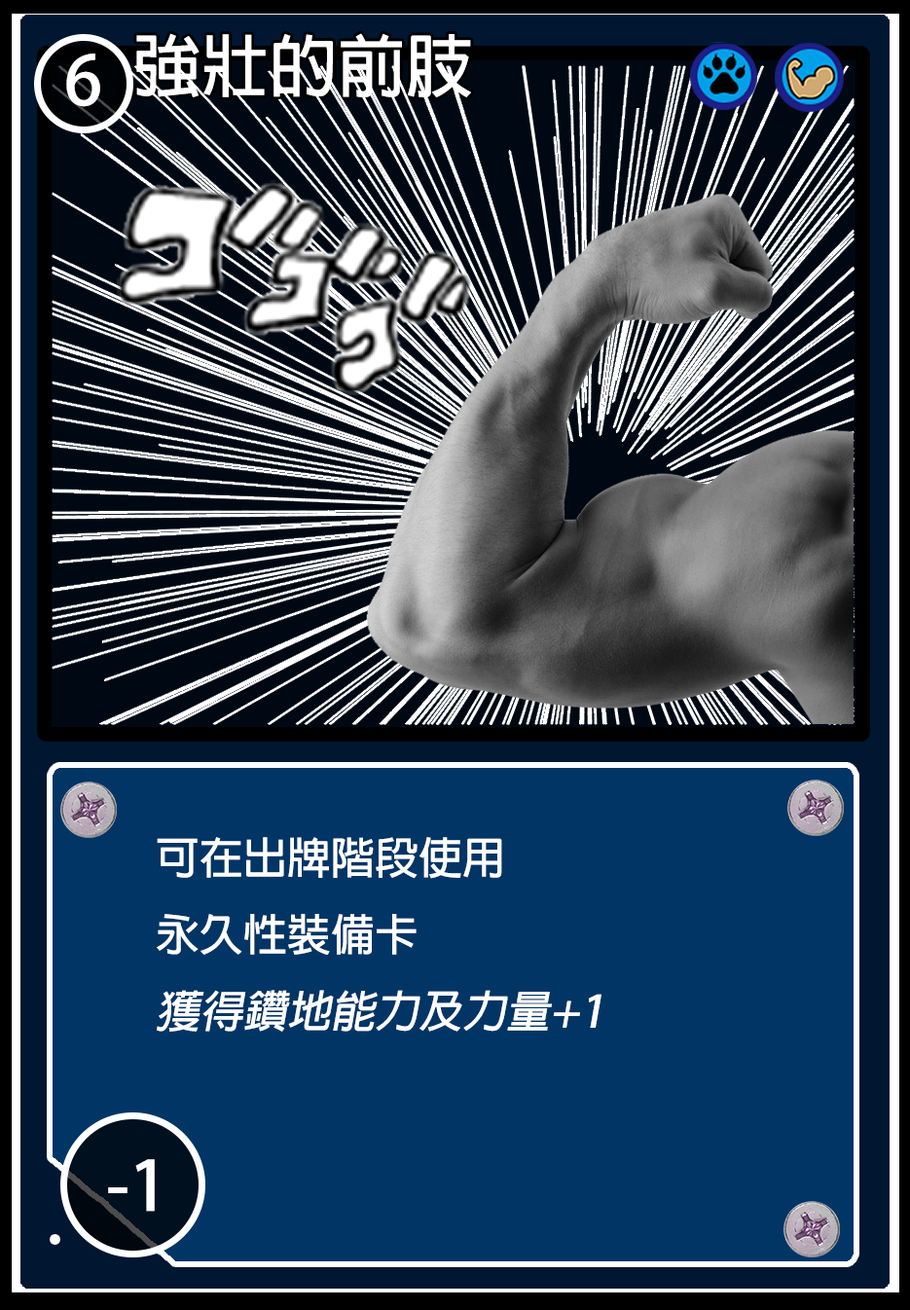
<style>
.page{position:relative;width:910px;height:1310px;background:#003566}
.page>*{position:absolute;margin:0}
.t1{font:68.1px "AdobeFanHeitiStd-Bold";color:#ffffff}
.t2{font:67.8px "AdobeFanHeitiStd-Bold";color:#ffffff}
.t3{font:43.8px "AdobeFanHeitiStd-Bold";color:#ffffff}
.t4{font:43.8px "AdobeFanHeitiStd-Bold";color:#ffffff;font-style:italic}
</style>
<div class="page">
<p class="t1" style="left:136px;top:33px;width:335px;height:64px">強壯的前肢</p>
<p class="t2" style="left:66px;top:54px;width:34px;height:53px">6</p>
<p class="t3" style="left:157px;top:837px;width:445px;height:195px">可在出牌階段使用<br>永久性裝備卡<br><span class="t4">獲得鑽地能力及力量+1</span></p>
<p class="t1" style="left:108px;top:1159px;width:47px;height:53px">-1</p>
</div>
